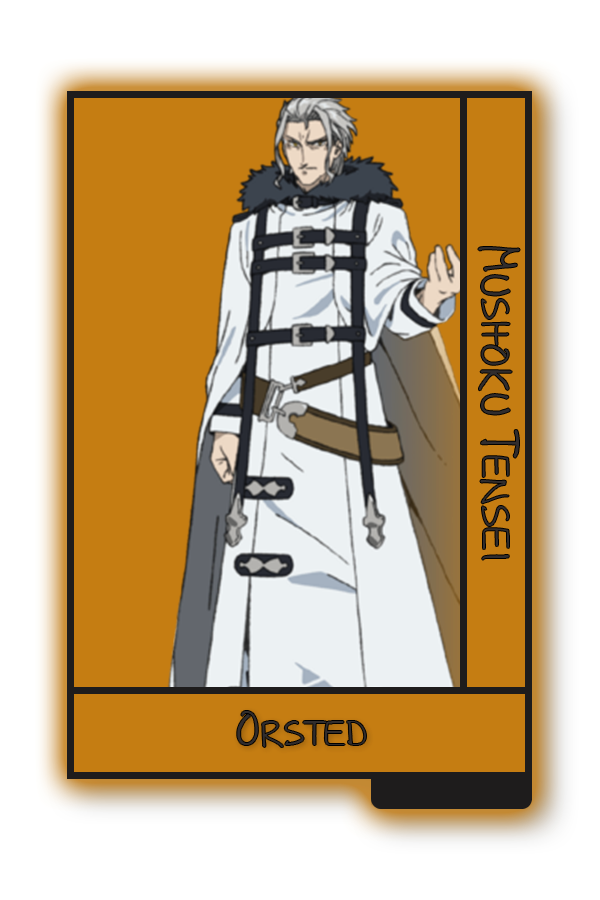
<style>
.page{position:relative;width:600px;height:900px;background:#c57d12}
.page>*{position:absolute;margin:0}
.t1{font:41px "AllCaps";color:#312d2d}
.t2{font:38.3px "AllCaps";color:#312d2d}
</style>
<div class="page">
<p class="t1" style="left:478px;top:247px;width:42px;height:313px;rotate:90deg">Mushoku Tensei</p>
<p class="t2" style="left:237px;top:711px;width:129px;height:36px">Orsted</p>
</div>
